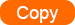
<style>
.page{position:relative;width:75px;height:25px;background:#ff6a00}
.page>*{position:absolute;margin:0}
.t1{font:18px "ArialMT";color:#ffffff}
</style>
<div class="page">
<p class="t1" style="left:17px;top:6px;width:41px;height:17px">Copy</p>
</div>
